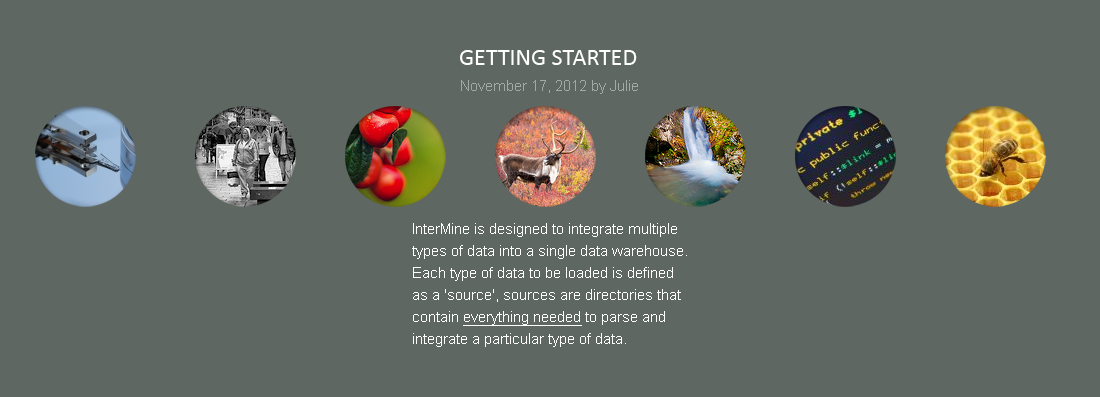
<style>
.page{position:relative;width:1100px;height:397px;background:#5f6762}
.page>*{position:absolute;margin:0}
.t1{font:24px "Calibri";color:#ffffff;text-transform:uppercase}
.t2{font:15px "ArialMT";color:#9faba3}
.t3{font:15px/22px "ArialMT";color:#ffffff}
.t4{font:15px/22px "ArialMT";color:#ffffff;text-decoration:underline}
</style>
<div class="page">
<p class="t1" style="left:460px;top:50px;width:177px;height:15px">getting started</p>
<p class="t2" style="left:461px;top:80px;width:177px;height:14px">November 17, 2012 by Julie</p>
<p class="t3" style="left:412px;top:223px;width:275px;height:124px">InterMine is designed to integrate multiple<br>types of data into a single data warehouse.<br>Each type of data to be loaded is defined<br>as a 'source', sources are directories that<br>contain <span class="t4">everything needed</span> to parse and<br>integrate a particular type of data.</p>
</div>
